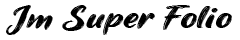
<style>
.page{position:relative;width:240px;height:40px;background:#ffffff}
.page>*{position:absolute;margin:0}
.t1{font:30px "JamesStroker";letter-spacing:0.01em;color:#000000;scale:1.3 1}
</style>
<div class="page">
<p class="t1" style="left:6px;top:5px;width:226px;height:30px">Jm Super Folio</p>
</div>
